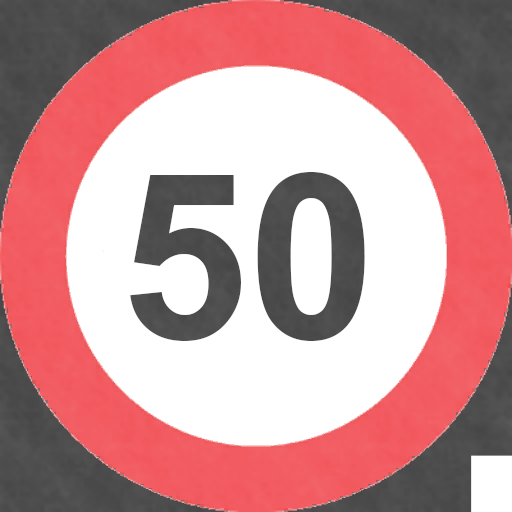
<style>
.page{position:relative;width:512px;height:512px;background:#ffffff}
.page>*{position:absolute;margin:0}
.t1{font:230px "Arial-BoldMT";color:#4c4c4c}
</style>
<div class="page">
<p class="t1" style="left:130px;top:172px;width:235px;height:169px">50</p>
</div>
